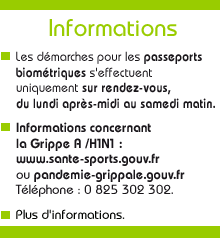
<style>
.page{position:relative;width:220px;height:238px;background:#ffffff}
.page>*{position:absolute;margin:0}
.t1{font:24px "DynameSSK";color:#99cc00}
.t2{font:13px "DynameSSK-SemiBold";color:#1a171b;scale:0.95 1}
.t3{font:13px "DynameSSK";color:#1a171b;scale:0.95 1}
.t4{font:13px "DynameSSK-SemiBold";color:#1a171b}
.t5{font:13px "DynameSSK";color:#1a171b}
.t6{font:13px "DynameSSK";color:#010300}
</style>
<div class="page">
<p class="t1" style="left:49px;top:19px;width:128px;height:18px">Informations</p>
<p class="t2" style="left:16px;top:51px;width:199px;height:60px"><span class="t3">Les démarches pour les </span>passeports<br>biométriques<span class="t3"> s'effectuent<br>uniquement </span>sur rendez-vous,<br>du lundi après-midi au samedi matin.</p>
<p class="t4" style="left:15px;top:122px;width:170px;height:75px">Informations concernant<br>la Grippe A /H1N1 :<br>www.sante-sports.gouv.fr<br><span class="t5">ou </span>pandemie-grippale.gouv.fr<br><span class="t5">Téléphone : 0 825 302 302.</span></p>
<p class="t6" style="left:16px;top:209px;width:109px;height:10px">Plus d'informations.</p>
</div>
